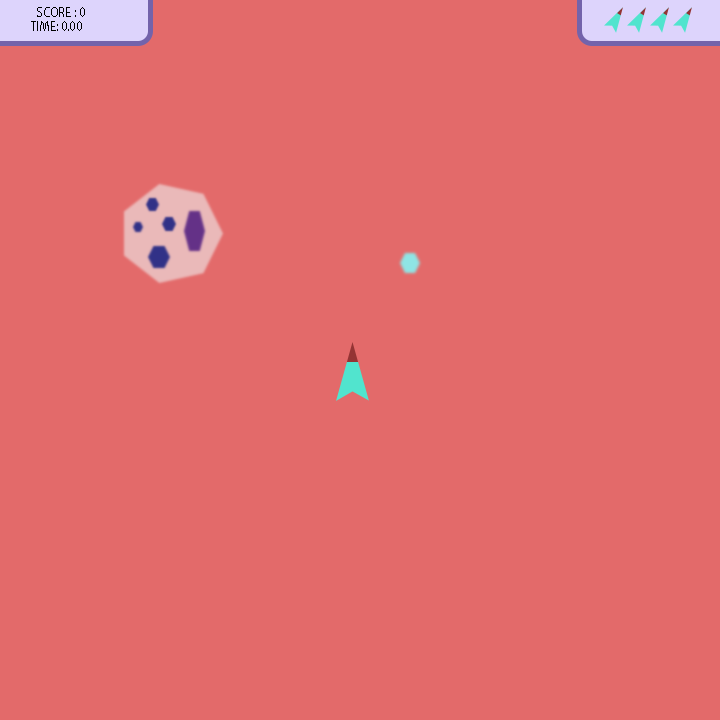
<style>
.page{position:relative;width:720px;height:720px;background:#e36a6a}
.page>*{position:absolute;margin:0}
.t1{font:12px "AdobeHeitiStd-Regular";color:#000000}
</style>
<div class="page">
<p class="t1" style="left:31px;top:7px;width:54px;height:24px;text-align:justify">SCORE : 0<br>TIME: 0.00</p>
</div>
